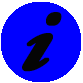
<style>
.page{position:relative;width:83px;height:83px;background:#0000ff}
.page>*{position:absolute;margin:0}
.t1{font:90px "AGaramondPro-BoldItalic";color:#050505;font-weight:bold;font-style:italic}
</style>
<div class="page">
<p class="t1" style="left:22px;top:12px;width:40px;height:60px">i</p>
</div>
